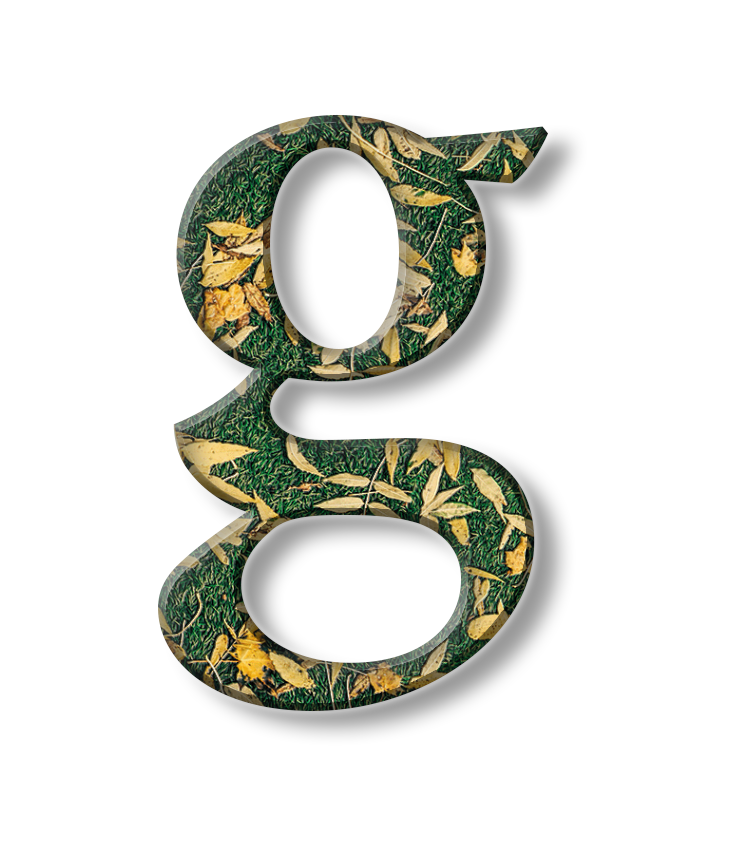
<style>
.page{position:relative;width:754px;height:853px;background:#ffffff}
.page>*{position:absolute;margin:0}
.t1{font:927.3px "AdobeGurmukhi-Bold"}
</style>
<div class="page">
<p class="t1" style="left:158px;top:114px;width:391px;height:598px">g</p>
</div>
